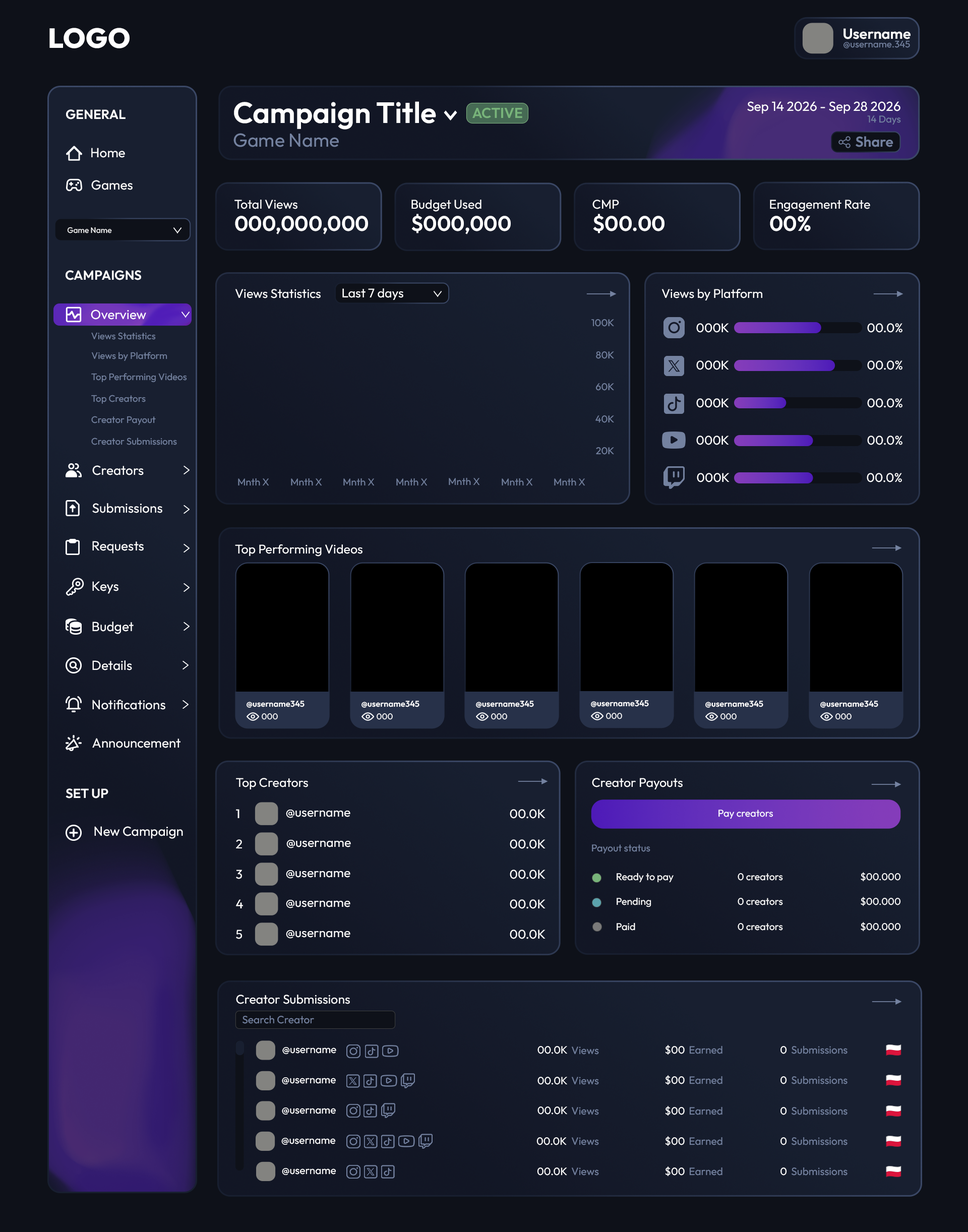
<style>
.page{position:relative;width:968px;height:1232px;background:#0e1119}
.page>*{position:absolute;margin:0}
.t1{font:27.6px "Outfit-ExtraBold";color:#ffffff}
.t2{font:14.6px "Outfit-SemiBold";color:#ffffff}
.t3{font:9.4px "Outfit-Regular";color:#6d82b1}
.t4{font:29.4px "Outfit-SemiBold";color:#ffffff}
.t5{font:13.2px "Outfit-Regular";color:#ffffff}
.t6{font:13.2px "Outfit-SemiBold";color:#ffffff}
.t7{font:14.3px "Outfit-SemiBold";color:#78b47a}
.t8{font:9.9px "Outfit-Regular";color:#6d82b1}
.t9{font:18.9px "Outfit-Regular";color:#6d82b1}
.t10{font:14.3px "Outfit-SemiBold";color:#6d82b1}
.t11{font:12.7px "Outfit-Regular";color:#ffffff}
.t12{font:21px "Outfit-SemiBold";color:#ffffff}
.t13{font:7.9px "Outfit-Regular";color:#ffffff}
.t14{font:12.6px "Outfit-Regular";color:#ffffff}
.t15{font:8.4px "Outfit-SemiBold";color:#ffffff}
.t16{font:8.4px "Outfit-Regular";color:#ffffff}
.t17{font:9.9px "Outfit-Regular";color:#ffffff}
.t18{font:10.6px "Outfit-Regular";color:#6d82b1}
.t19{font:10.6px "Outfit-Regular";color:#ffffff}
</style>
<div class="page">
<p class="t1" style="left:49px;top:28px;width:81px;height:20px">LOGO</p>
<p class="t2" style="left:843px;top:28px;width:67px;height:11px">Username</p>
<p class="t3" style="left:843px;top:40px;width:67px;height:8px">@username.345</p>
<p class="t4" style="left:234px;top:101px;width:202px;height:29px">Campaign Title</p>
<p class="t5" style="left:747px;top:101px;width:153px;height:13px">Sep 14 2026 - Sep 28 2026</p>
<p class="t6" style="left:66px;top:109px;width:60px;height:10px">GENERAL</p>
<p class="t7" style="left:472px;top:107px;width:50px;height:11px">ACTIVE</p>
<p class="t8" style="left:867px;top:115px;width:34px;height:10px">14 Days</p>
<p class="t9" style="left:233px;top:133px;width:106px;height:14px">Game Name</p>
<p class="t10" style="left:855px;top:136px;width:38px;height:11px">Share</p>
<p class="t5" style="left:91px;top:148px;width:34px;height:10px">Home</p>
<p class="t5" style="left:91px;top:180px;width:42px;height:10px">Games</p>
<p class="t11" style="left:234px;top:200px;width:63px;height:9px">Total Views</p>
<p class="t11" style="left:411px;top:200px;width:70px;height:12px">Budget Used</p>
<p class="t11" style="left:592px;top:200px;width:27px;height:9px">CMP</p>
<p class="t11" style="left:770px;top:200px;width:100px;height:12px">Engagement Rate</p>
<p class="t12" style="left:235px;top:216px;width:133px;height:18px">000,000,000</p>
<p class="t12" style="left:411px;top:214px;width:100px;height:20px">$000,000</p>
<p class="t12" style="left:593px;top:214px;width:71px;height:19px">$00.00</p>
<p class="t12" style="left:770px;top:216px;width:41px;height:15px">00%</p>
<p class="t13" style="left:67px;top:227px;width:45px;height:6px">Game Name</p>
<p class="t6" style="left:66px;top:270px;width:75px;height:10px">CAMPAIGNS</p>
<p class="t14" style="left:235px;top:289px;width:86px;height:9px">Views Statistics</p>
<p class="t14" style="left:342px;top:288px;width:61px;height:12px">Last 7 days</p>
<p class="t14" style="left:661px;top:289px;width:101px;height:11px">Views by Platform</p>
<p class="t5" style="left:91px;top:310px;width:55px;height:10px">Overview</p>
<p class="t8" style="left:591px;top:319px;width:23px;height:8px">100K</p>
<p class="t14" style="left:696px;top:323px;width:33px;height:10px">000K</p>
<p class="t14" style="left:867px;top:323px;width:35px;height:10px">00.0%</p>
<p class="t3" style="left:91px;top:332px;width:65px;height:8px">Views Statistics</p>
<p class="t3" style="left:91px;top:352px;width:76px;height:9px">Views by Platform</p>
<p class="t8" style="left:596px;top:351px;width:18px;height:8px">80K</p>
<p class="t14" style="left:696px;top:360px;width:33px;height:10px">000K</p>
<p class="t14" style="left:867px;top:360px;width:35px;height:10px">00.0%</p>
<p class="t3" style="left:91px;top:373px;width:96px;height:10px">Top Performing Videos</p>
<p class="t8" style="left:595px;top:383px;width:19px;height:8px">60K</p>
<p class="t3" style="left:91px;top:395px;width:55px;height:9px">Top Creators</p>
<p class="t14" style="left:696px;top:398px;width:33px;height:10px">000K</p>
<p class="t14" style="left:867px;top:398px;width:35px;height:10px">00.0%</p>
<p class="t3" style="left:91px;top:416px;width:65px;height:9px">Creator Payout</p>
<p class="t8" style="left:595px;top:415px;width:19px;height:8px">40K</p>
<p class="t3" style="left:91px;top:438px;width:86px;height:7px">Creator Submissions</p>
<p class="t14" style="left:696px;top:436px;width:33px;height:9px">000K</p>
<p class="t14" style="left:867px;top:436px;width:35px;height:9px">00.0%</p>
<p class="t8" style="left:596px;top:447px;width:18px;height:8px">20K</p>
<p class="t5" style="left:92px;top:465px;width:52px;height:10px">Creators</p>
<p class="t14" style="left:697px;top:473px;width:32px;height:9px">000K</p>
<p class="t14" style="left:867px;top:473px;width:35px;height:9px">00.0%</p>
<p class="t8" style="left:238px;top:478px;width:31px;height:8px">Mnth X</p>
<p class="t8" style="left:291px;top:478px;width:31px;height:8px">Mnth X</p>
<p class="t8" style="left:343px;top:478px;width:32px;height:8px">Mnth X</p>
<p class="t8" style="left:396px;top:478px;width:31px;height:8px">Mnth X</p>
<p class="t8" style="left:449px;top:477px;width:31px;height:8px">Mnth X</p>
<p class="t8" style="left:502px;top:478px;width:31px;height:8px">Mnth X</p>
<p class="t8" style="left:554px;top:478px;width:31px;height:8px">Mnth X</p>
<p class="t5" style="left:92px;top:503px;width:70px;height:10px">Submissions</p>
<p class="t5" style="left:92px;top:541px;width:52px;height:13px">Requests</p>
<p class="t14" style="left:235px;top:544px;width:127px;height:13px">Top Performing Videos</p>
<p class="t5" style="left:92px;top:581px;width:26px;height:13px">Keys</p>
<p class="t5" style="left:92px;top:622px;width:42px;height:12px">Budget</p>
<p class="t5" style="left:92px;top:660px;width:40px;height:10px">Details</p>
<p class="t5" style="left:92px;top:700px;width:73px;height:10px">Notifications</p>
<p class="t15" style="left:247px;top:701px;width:57px;height:7px">@username345</p>
<p class="t15" style="left:361px;top:701px;width:58px;height:7px">@username345</p>
<p class="t15" style="left:476px;top:701px;width:58px;height:7px">@username345</p>
<p class="t15" style="left:591px;top:700px;width:58px;height:7px">@username345</p>
<p class="t15" style="left:705px;top:701px;width:58px;height:7px">@username345</p>
<p class="t15" style="left:820px;top:701px;width:58px;height:7px">@username345</p>
<p class="t16" style="left:262px;top:713px;width:16px;height:7px">000</p>
<p class="t16" style="left:377px;top:713px;width:16px;height:7px">000</p>
<p class="t16" style="left:491px;top:713px;width:16px;height:7px">000</p>
<p class="t16" style="left:606px;top:713px;width:16px;height:6px">000</p>
<p class="t16" style="left:720px;top:713px;width:16px;height:7px">000</p>
<p class="t16" style="left:835px;top:713px;width:16px;height:7px">000</p>
<p class="t5" style="left:92px;top:738px;width:88px;height:10px">Announcement</p>
<p class="t14" style="left:236px;top:778px;width:72px;height:11px">Top Creators</p>
<p class="t14" style="left:592px;top:778px;width:91px;height:11px">Creator Payouts</p>
<p class="t6" style="left:66px;top:788px;width:42px;height:10px">SET UP</p>
<p class="t14" style="left:236px;top:809px;width:3px;height:9px">1</p>
<p class="t14" style="left:286px;top:810px;width:64px;height:8px">@username</p>
<p class="t14" style="left:510px;top:809px;width:35px;height:10px">00.0K</p>
<p class="t17" style="left:718px;top:810px;width:55px;height:9px">Pay creators</p>
<p class="t5" style="left:94px;top:826px;width:89px;height:13px">New Campaign</p>
<p class="t14" style="left:236px;top:839px;width:6px;height:9px">2</p>
<p class="t14" style="left:286px;top:840px;width:65px;height:8px">@username</p>
<p class="t14" style="left:510px;top:839px;width:35px;height:10px">00.0K</p>
<p class="t8" style="left:592px;top:844px;width:58px;height:10px">Payout status</p>
<p class="t14" style="left:236px;top:870px;width:6px;height:9px">3</p>
<p class="t14" style="left:510px;top:870px;width:35px;height:9px">00.0K</p>
<p class="t14" style="left:286px;top:870px;width:64px;height:9px">@username</p>
<p class="t17" style="left:617px;top:873px;width:56px;height:10px">Ready to pay</p>
<p class="t17" style="left:737px;top:873px;width:46px;height:8px">0 creators</p>
<p class="t17" style="left:860px;top:872px;width:41px;height:10px">$00.000</p>
<p class="t14" style="left:236px;top:899px;width:7px;height:9px">4</p>
<p class="t14" style="left:286px;top:900px;width:64px;height:8px">@username</p>
<p class="t14" style="left:510px;top:899px;width:35px;height:10px">00.0K</p>
<p class="t17" style="left:617px;top:897px;width:34px;height:10px">Pending</p>
<p class="t17" style="left:737px;top:898px;width:46px;height:7px">0 creators</p>
<p class="t17" style="left:860px;top:897px;width:41px;height:9px">$00.000</p>
<p class="t14" style="left:236px;top:930px;width:6px;height:9px">5</p>
<p class="t14" style="left:510px;top:930px;width:35px;height:9px">00.0K</p>
<p class="t17" style="left:617px;top:923px;width:18px;height:8px">Paid</p>
<p class="t17" style="left:737px;top:923px;width:46px;height:8px">0 creators</p>
<p class="t17" style="left:860px;top:922px;width:41px;height:10px">$00.000</p>
<p class="t14" style="left:286px;top:930px;width:64px;height:9px">@username</p>
<p class="t14" style="left:236px;top:995px;width:114px;height:9px">Creator Submissions</p>
<p class="t18" style="left:242px;top:1015px;width:72px;height:9px">Search Creator</p>
<p class="t19" style="left:282px;top:1047px;width:54px;height:8px">@username</p>
<p class="t19" style="left:537px;top:1046px;width:30px;height:8px">00.0K</p>
<p class="t18" style="left:572px;top:1047px;width:27px;height:8px">Views</p>
<p class="t19" style="left:665px;top:1045px;width:20px;height:10px">$00</p>
<p class="t18" style="left:689px;top:1046px;width:33px;height:8px">Earned</p>
<p class="t19" style="left:780px;top:1046px;width:7px;height:8px">0</p>
<p class="t18" style="left:791px;top:1046px;width:56px;height:8px">Submissions</p>
<p class="t19" style="left:282px;top:1077px;width:54px;height:8px">@username</p>
<p class="t19" style="left:537px;top:1077px;width:30px;height:8px">00.0K</p>
<p class="t18" style="left:572px;top:1077px;width:27px;height:8px">Views</p>
<p class="t19" style="left:665px;top:1075px;width:20px;height:10px">$00</p>
<p class="t18" style="left:689px;top:1076px;width:33px;height:8px">Earned</p>
<p class="t19" style="left:780px;top:1076px;width:7px;height:8px">0</p>
<p class="t18" style="left:791px;top:1076px;width:56px;height:8px">Submissions</p>
<p class="t19" style="left:282px;top:1108px;width:54px;height:7px">@username</p>
<p class="t19" style="left:537px;top:1106px;width:30px;height:9px">00.0K</p>
<p class="t18" style="left:572px;top:1107px;width:27px;height:8px">Views</p>
<p class="t19" style="left:665px;top:1106px;width:20px;height:10px">$00</p>
<p class="t18" style="left:689px;top:1106px;width:33px;height:9px">Earned</p>
<p class="t19" style="left:780px;top:1107px;width:7px;height:8px">0</p>
<p class="t18" style="left:791px;top:1106px;width:56px;height:9px">Submissions</p>
<p class="t19" style="left:281px;top:1138px;width:55px;height:7px">@username</p>
<p class="t19" style="left:536px;top:1137px;width:31px;height:8px">00.0K</p>
<p class="t18" style="left:572px;top:1137px;width:27px;height:8px">Views</p>
<p class="t19" style="left:665px;top:1136px;width:20px;height:10px">$00</p>
<p class="t18" style="left:689px;top:1137px;width:33px;height:8px">Earned</p>
<p class="t19" style="left:780px;top:1137px;width:7px;height:8px">0</p>
<p class="t18" style="left:791px;top:1137px;width:56px;height:8px">Submissions</p>
<p class="t19" style="left:282px;top:1168px;width:54px;height:7px">@username</p>
<p class="t19" style="left:537px;top:1167px;width:30px;height:9px">00.0K</p>
<p class="t18" style="left:572px;top:1167px;width:27px;height:9px">Views</p>
<p class="t19" style="left:665px;top:1166px;width:20px;height:10px">$00</p>
<p class="t18" style="left:689px;top:1167px;width:33px;height:9px">Earned</p>
<p class="t19" style="left:780px;top:1167px;width:7px;height:9px">0</p>
<p class="t18" style="left:791px;top:1167px;width:56px;height:9px">Submissions</p>
</div>
